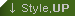
<style>
.page{position:relative;width:75px;height:16px;background:#406618}
.page>*{position:absolute;margin:0}
.t1{font:11px "Gulim";letter-spacing:-0.01em;color:#c2c2c2}
.t2{font:12px "Gulim";letter-spacing:-0.01em;color:#c2c2c2}
.t3{font:11px "Gulim";letter-spacing:-0.01em;color:#c2c2c2;font-weight:bold}
</style>
<div class="page">
<p class="t1" style="left:10px;top:3px;width:59px;height:11px"><span class="t2">↓</span> Style.<span class="t3">UP</span></p>
</div>
